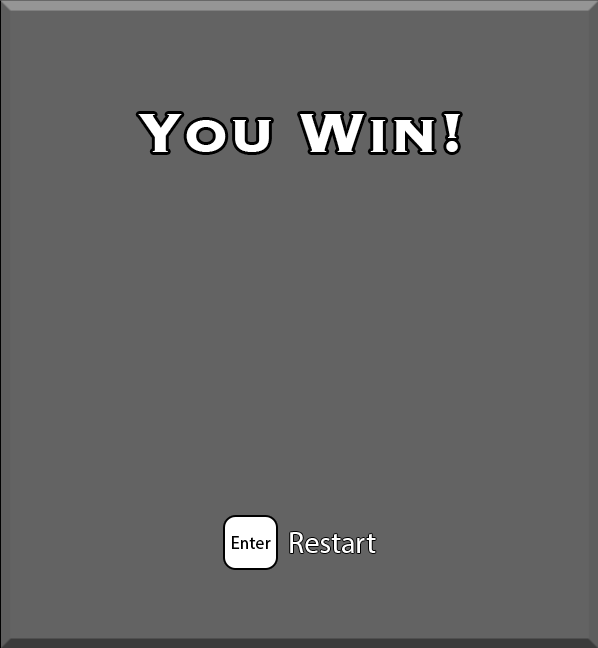
<style>
.page{position:relative;width:598px;height:648px;background:#636363}
.page>*{position:absolute;margin:0}
.t1{font:72px "Copperplate-Bold";color:#ffffff}
.t2{font:30px "MyriadPro-Regular";color:#ffffff}
</style>
<div class="page">
<p class="t1" style="left:138px;top:114px;width:322px;height:38px">You Win!</p>
<p class="t2" style="left:290px;top:532px;width:86px;height:21px">Restart</p>
</div>
